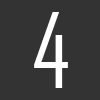
<style>
.page{position:relative;width:100px;height:100px;background:#333333}
.page>*{position:absolute;margin:0}
.t1{font:100px "AgencyFB-Reg";color:#ffffff}
</style>
<div class="page">
<p class="t1" style="left:34px;top:12px;width:34px;height:76px">4</p>
</div>
